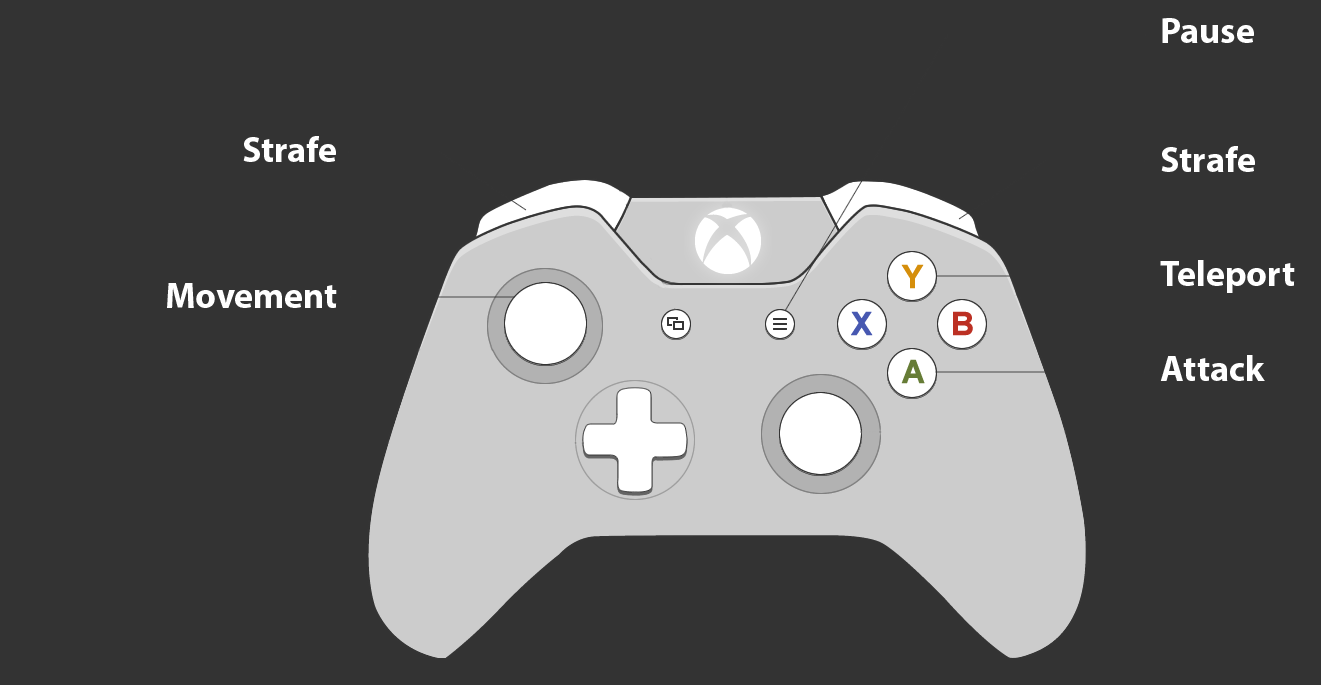
<style>
.page{position:relative;width:1321px;height:685px;background:#333333}
.page>*{position:absolute;margin:0}
.t1{font:36px "MyriadPro-Bold";color:#ffffff}
</style>
<div class="page">
<p class="t1" style="left:1162px;top:18px;width:92px;height:25px">Pause</p>
<p class="t1" style="left:243px;top:136px;width:93px;height:26px">Strafe</p>
<p class="t1" style="left:1161px;top:146px;width:94px;height:26px">Strafe</p>
<p class="t1" style="left:1160px;top:260px;width:135px;height:33px">Teleport</p>
<p class="t1" style="left:167px;top:283px;width:170px;height:25px">Movement</p>
<p class="t1" style="left:1160px;top:355px;width:105px;height:26px">Attack</p>
</div>
